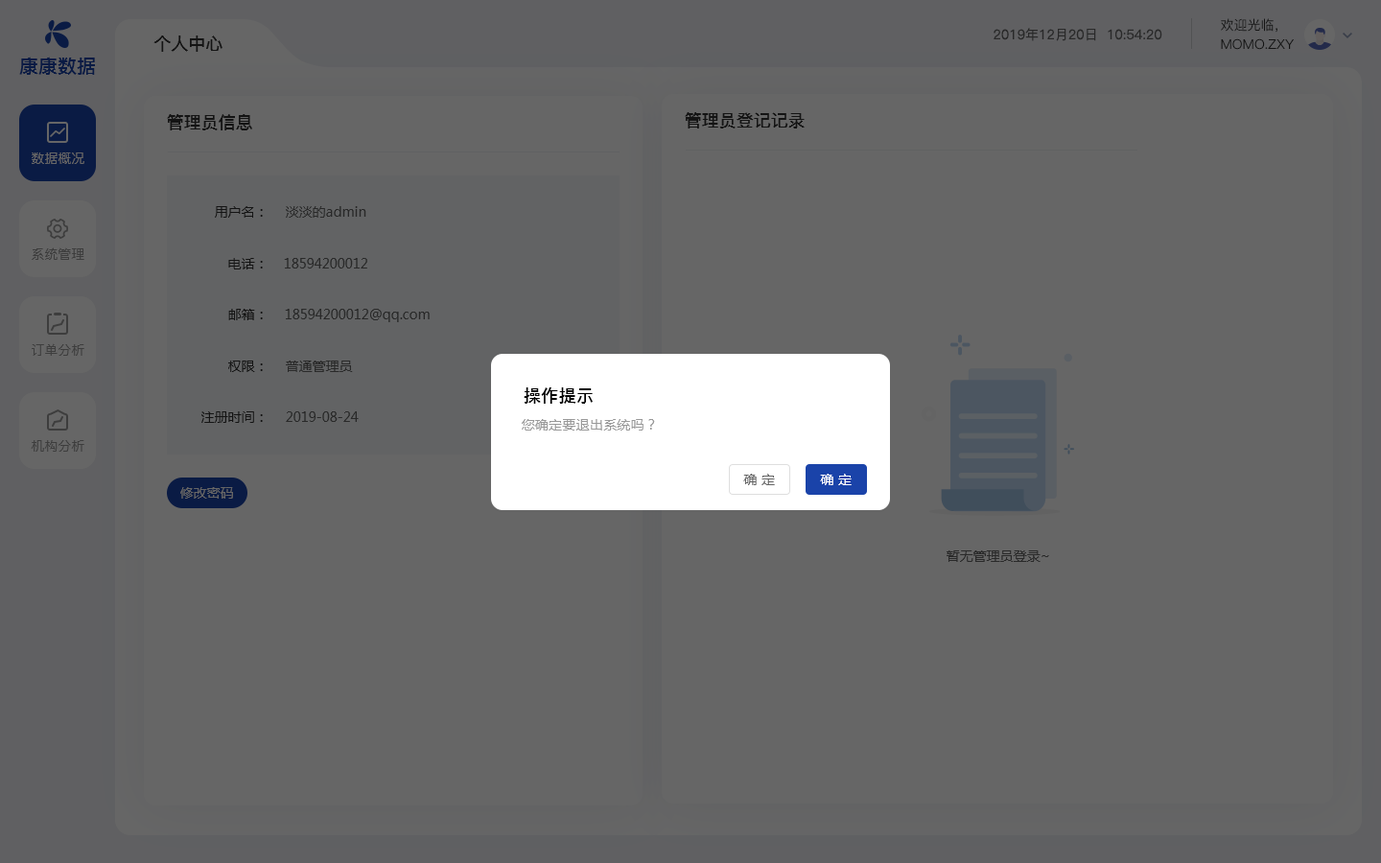
<style>
.page{position:relative;width:1381px;height:863px;background:#666666}
.page>*{position:absolute;margin:0}
.t1{font:13.4px "PingFang-SC-Regular";color:#292929}
.t2{font:13.4px "PingFang-SC-Medium";color:#141414;text-transform:uppercase}
.t3{font:17.3px "PingFang-SC-Bold";color:#141414;text-transform:uppercase}
.t4{font:19.2px "PingFangSC-Medium";color:#0a1b44;text-transform:uppercase}
.t5{font:17.3px "PingFang-SC-Bold";color:#141414}
.t6{font:13.4px "PingFang-SC-Medium";color:#666666;text-transform:uppercase}
.t7{font:13.4px "MicrosoftYaHei";color:#141414}
.t8{font:13.4px "MicrosoftYaHei";color:#292929}
.t9{font:13.4px "PingFang-SC-Medium";color:#3d3d3d;text-transform:uppercase}
.t10{font:17.3px "PingFang-SC-Bold";letter-spacing:0.02em;color:#000000}
.t11{font:13.4px "MicrosoftYaHei";letter-spacing:0.02em;color:#999999}
.t12{font:13.4px "MicrosoftYaHei";letter-spacing:0.02em;color:#666666}
.t13{font:13.4px "MicrosoftYaHei";letter-spacing:0.02em;color:#ffffff}
.t14{font:13.4px "MicrosoftYaHei";color:#666666}
</style>
<div class="page">
<p class="t1" style="left:994px;top:28px;width:169px;height:13px">2019年12月20日  10:54:20</p>
<p class="t2" style="left:1221px;top:18px;width:57px;height:15px">欢迎光临，</p>
<p class="t3" style="left:153px;top:35px;width:70px;height:17px">个人中心</p>
<p class="t2" style="left:1221px;top:38px;width:73px;height:12px">momo.zxy</p>
<p class="t4" style="left:19px;top:57px;width:76px;height:18px">康康数据</p>
<p class="t5" style="left:685px;top:112px;width:120px;height:17px">管理员登记记录</p>
<p class="t5" style="left:167px;top:114px;width:85px;height:16px">管理员信息</p>
<p class="t6" style="left:32px;top:153px;width:52px;height:11px">数据概况</p>
<p class="t7" style="left:215px;top:206px;width:48px;height:12px">用户名：</p>
<p class="t8" style="left:286px;top:206px;width:80px;height:12px">淡淡的admin</p>
<p class="t9" style="left:32px;top:247px;width:52px;height:13px">系统管理</p>
<p class="t7" style="left:228px;top:258px;width:35px;height:12px">电话：</p>
<p class="t8" style="left:284px;top:258px;width:83px;height:11px">18594200012</p>
<p class="t7" style="left:228px;top:309px;width:35px;height:11px">邮箱：</p>
<p class="t8" style="left:285px;top:309px;width:145px;height:13px">18594200012@qq.com</p>
<p class="t9" style="left:32px;top:343px;width:52px;height:13px">订单分析</p>
<p class="t7" style="left:228px;top:361px;width:35px;height:11px">权限：</p>
<p class="t8" style="left:286px;top:361px;width:67px;height:11px">普通管理员</p>
<p class="t10" style="left:524px;top:388px;width:69px;height:16px">操作提示</p>
<p class="t7" style="left:201px;top:412px;width:62px;height:11px">注册时间：</p>
<p class="t8" style="left:286px;top:412px;width:73px;height:10px">2019-08-24</p>
<p class="t11" style="left:522px;top:419px;width:133px;height:12px">您确定要退出系统吗？</p>
<p class="t9" style="left:31px;top:440px;width:53px;height:12px">机构分析</p>
<p class="t12" style="left:743px;top:474px;width:32px;height:11px">确 定</p>
<p class="t13" style="left:820px;top:474px;width:32px;height:11px">确 定</p>
<p class="t14" style="left:180px;top:487px;width:53px;height:12px">修改密码</p>
<p class="t8" style="left:947px;top:551px;width:102px;height:11px">暂无管理员登录~</p>
</div>
